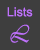
<style>
.page{position:relative;width:40px;height:50px;background:#3e3e3e}
.page>*{position:absolute;margin:0}
.t1{font:12.5px "ArialMT";color:#bf71fb}
.t2{font:25px "Vivaldii";color:#bf71fb;scale:0.86 1}
</style>
<div class="page">
<p class="t1" style="left:7px;top:7px;width:26px;height:10px">Lists</p>
<p class="t2" style="left:10px;top:24px;width:20px;height:19px">L</p>
</div>
